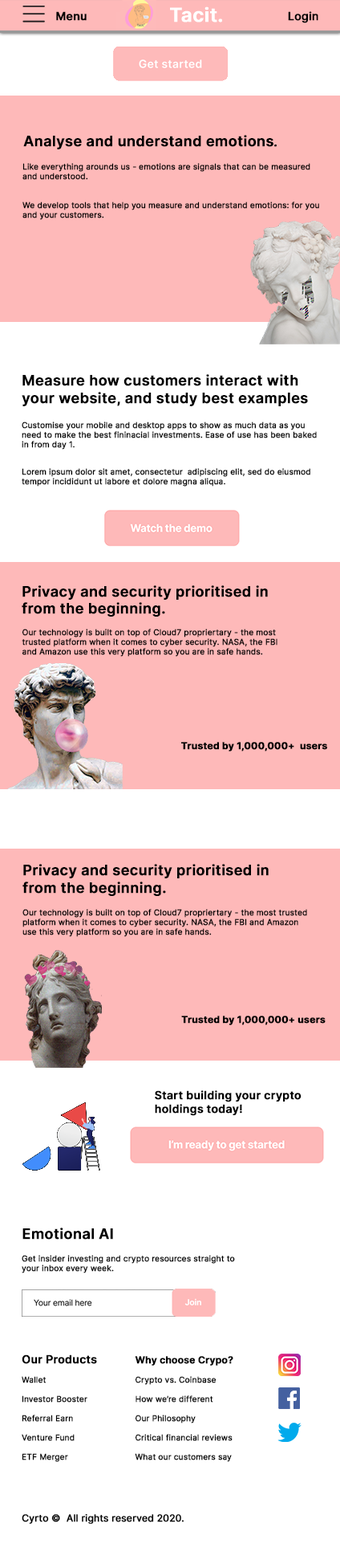
<style>
.page{position:relative;width:340px;height:1568px;background:#ffffff}
.page>*{position:absolute;margin:0}
.t1{font:11.2px "Inter-SemiBold";color:#000000;font-weight:bold}
.t2{font:19.3px "Inter-SemiBold";color:#ffffff;font-weight:bold}
.t3{font:11.2px "Inter-Medium";color:#000000;font-weight:bold}
.t4{font:24.1px "WorkSans-Italic";color:#000000;font-weight:bold}
.t5{font:14.5px "Inter-SemiBold";color:#000000;font-weight:bold}
.t6{font:14.5px "WorkSans-Italic";color:#000000;font-weight:bold}
.t7{font:8px "Inter-Regular";color:#000000;font-weight:bold}
.t8{font:9.6px "Inter-Bold";color:#000000;font-weight:bold}
.t9{font:9.6px "Inter-SemiBold";color:#000000;font-weight:bold}
.t10{font:9.6px "Inter-Regular";color:#000000;font-weight:bold}
</style>
<div class="page">
<p class="t1" style="left:56px;top:11px;width:31px;height:10px">Menu</p>
<p class="t2" style="left:170px;top:6px;width:52px;height:16px">Tacit.</p>
<p class="t3" style="left:288px;top:11px;width:31px;height:12px"><span class="t4">  </span>Login</p>
<p class="t5" style="left:23px;top:135px;width:254px;height:14px">Analyse and understand emotions<span class="t6">.</span></p>
<p class="t7" style="left:22px;top:163px;width:298px;height:57px">Like everything arounds us - emotions are signals that can be measured and understood. <br><br><br>We develop tools that help you measure and understand emotions: for you and your customers.</p>
<p class="t5" style="left:22px;top:374px;width:286px;height:32px">Measure how customers interact with<br>your website, and study best examples</p>
<p class="t7" style="left:22px;top:422px;width:295px;height:65px">Customise your mobile and desktop apps to show as much data as you <br>need to make the best fininacial investments. Ease of use has been baked <br>in from day 1.<br> <br>Lorem ipsum dolor sit amet, consectetur adipiscing elit, sed do eiusmod <br>tempor incididunt ut labore et dolore magna aliqua.</p>
<p class="t5" style="left:22px;top:585px;width:246px;height:32px">Privacy and security prioritised in from the beginning.</p>
<p class="t7" style="left:22px;top:629px;width:256px;height:28px">Our technology is built on top of Cloud7 propriertary - the most trusted platform when it comes to cyber security. NASA, the FBI and Amazon use this very platform so you are in safe hands.</p>
<p class="t8" style="left:181px;top:742px;width:147px;height:9px">Trusted by 1,000,000+  users</p>
<p class="t5" style="left:22px;top:864px;width:247px;height:32px">Privacy and security prioritised in from the beginning.</p>
<p class="t7" style="left:22px;top:909px;width:285px;height:28px">Our technology is built on top of Cloud7 propriertary - the most trusted platform when it comes to cyber security. NASA, the FBI and Amazon <br>use this very platform so you are in safe hands.</p>
<p class="t8" style="left:181px;top:1016px;width:145px;height:9px">Trusted by 1,000,000+ users</p>
<p class="t1" style="left:155px;top:1090px;width:147px;height:26px">Start building your crypto <br>holdings today!</p>
<p class="t5" style="left:22px;top:1228px;width:91px;height:12px">Emotional AI</p>
<p class="t7" style="left:22px;top:1255px;width:213px;height:18px">Get insider investing and crypto resources straight to your inbox every week.</p>
<p class="t7" style="left:22px;top:1354px;width:75px;height:108px"><span class="t1">Our Products<br><br></span>Wallet<br><br>Investor Booster<br><br>Referral Earn<br><br>Venture Fund<br><br>ETF Merger</p>
<p class="t7" style="left:135px;top:1356px;width:99px;height:106px"><span class="t9">Why choose Crypo?<br><br></span>Crypto vs. Coinbase<br><br>How we’re different<br><br>Our Philosophy<br><br>Critical financial reviews<br><br>What our customers say</p>
<p class="t10" style="left:22px;top:1513px;width:163px;height:11px">Cyrto ©  All rights reserved 2020.</p>
</div>
